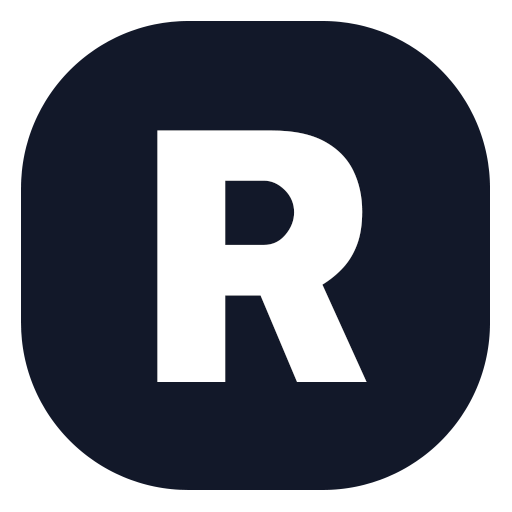
<style>
.page{position:relative;width:512px;height:512px;background:#121829}
.page>*{position:absolute;margin:0}
.t1{font:347.8px "PublicSans-Black";color:#ffffff}
</style>
<div class="page">
<p class="t1" style="left:157px;top:130px;width:210px;height:252px">R</p>
</div>
